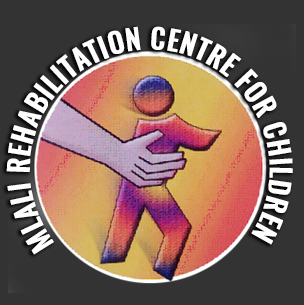
<style>
.page{position:relative;width:304px;height:305px;background:#333333}
.page>*{position:absolute;margin:0}
.t1{font:27.6px "Oswald-Medium";color:#fefefe;font-weight:bold}
</style>
<div class="page">
<p class="t1" style="left:6px;top:26px;width:287px;height:229px;rotate:90deg">MLALI REHABILITATION CENTRE FOR CHILDREN</p>
</div>
